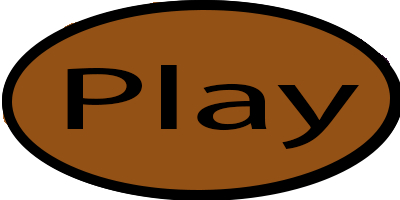
<style>
.page{position:relative;width:400px;height:200px;background:#945115}
.page>*{position:absolute;margin:0}
.t1{font:90.7px "MyriadPro-Regular";color:#000000;scale:1.97 1}
</style>
<div class="page">
<p class="t1" style="left:67px;top:65px;width:292px;height:84px">Play</p>
</div>
